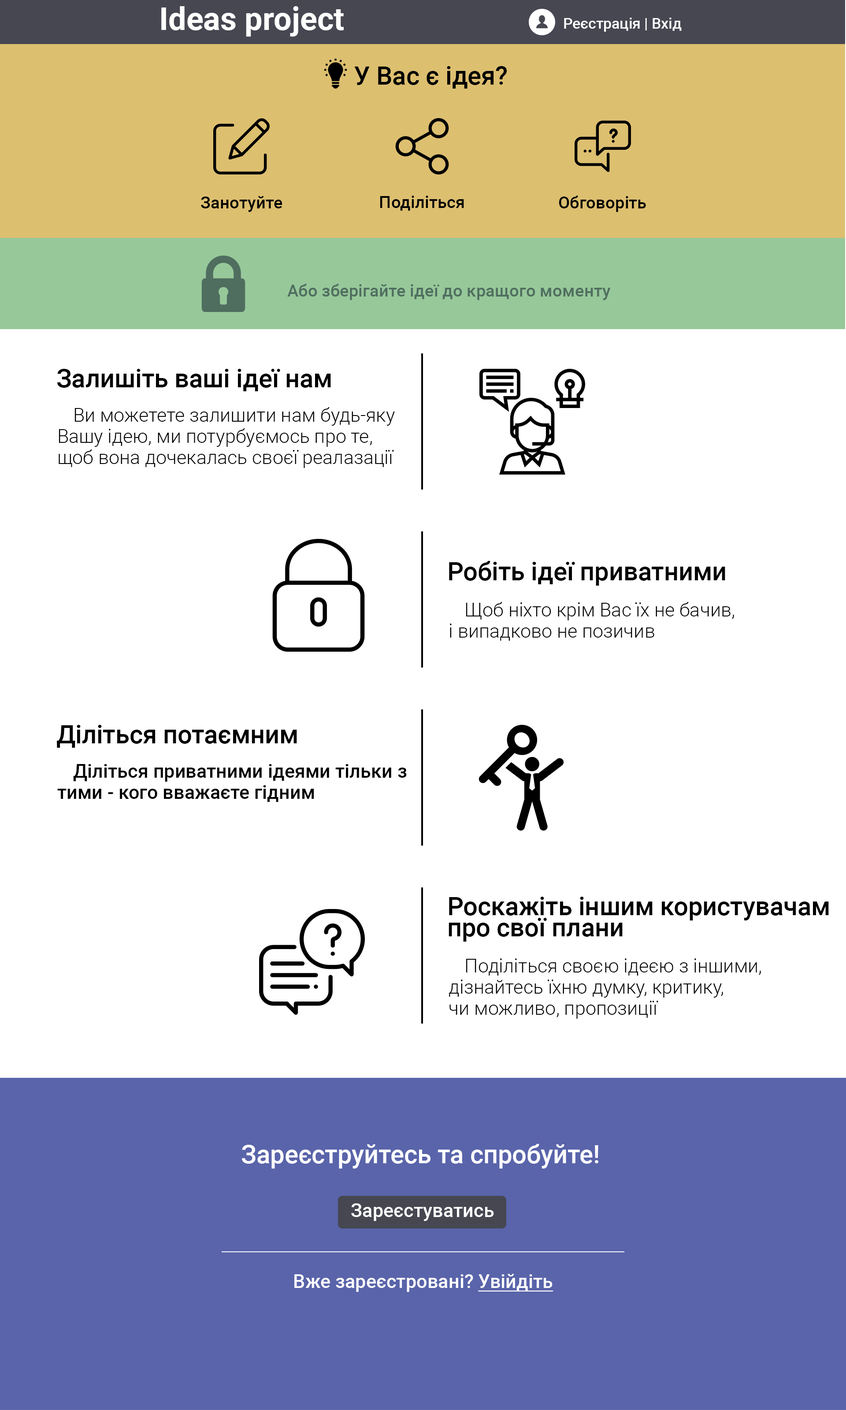
<style>
.page{position:relative;width:846px;height:1410px;background:#ffffff}
.page>*{position:absolute;margin:0}
.t1{font:31.7px "Roboto-Bold";color:#ffffff}
.t2{font:14.8px "Roboto-Medium";color:#ffffff}
.t3{font:25.4px "Roboto-Medium";color:#000000}
.t4{font:16.9px "Roboto-Medium";color:#000000}
.t5{font:16.9px "Roboto-Medium";color:#4f6e5f}
.t6{font:19px/21.1px "Roboto-Light";color:#000000}
.t7{font:19px/21.1px "Roboto-Medium";color:#000000}
.t8{font:25.4px/21.1px "Roboto-Medium";color:#000000}
.t9{font:25.4px "Roboto-Medium";color:#ffffff}
.t10{font:19px "Roboto-Medium";color:#ffffff}
.t11{font:19px "Roboto-Medium";color:#ffffff;text-decoration:underline}
</style>
<div class="page">
<p class="t1" style="left:161px;top:6px;width:183px;height:31px">Ideas project</p>
<p class="t2" style="left:564px;top:18px;width:118px;height:14px">Реєстрація | Вхід</p>
<p class="t3" style="left:354px;top:66px;width:153px;height:23px">У Вас є ідея?</p>
<p class="t4" style="left:201px;top:196px;width:81px;height:16px">Занотуйте</p>
<p class="t4" style="left:380px;top:196px;width:84px;height:15px">Поділіться</p>
<p class="t4" style="left:559px;top:196px;width:87px;height:16px">Обговоріть</p>
<p class="t5" style="left:287px;top:284px;width:324px;height:16px">Або зберігайте ідеї до кращого моменту</p>
<p class="t3" style="left:57px;top:369px;width:274px;height:22px">Залишіть ваші ідеї нам</p>
<p class="t6" style="left:59px;top:407px;width:336px;height:61px"><span class="t7"><br></span> Ви можетете залишити нам будь-яку<br>Вашу ідею, ми потурбуємось про те,<br>щоб вона дочекалась своєї реалазації</p>
<p class="t3" style="left:449px;top:561px;width:276px;height:24px">Робіть ідеї приватними</p>
<p class="t6" style="left:450px;top:602px;width:284px;height:39px;text-align:justify">Щоб ніхто крім Вас їх не бачив,<br>і випадково не позичив</p>
<p class="t3" style="left:57px;top:725px;width:240px;height:23px">Діліться потаємним</p>
<p class="t7" style="left:57px;top:764px;width:350px;height:38px">Діліться приватними ідеями тільки з<br>тими - кого вважаєте гідним</p>
<p class="t8" style="left:448px;top:897px;width:381px;height:44px">Роскажіть іншим користувачам<br>про свої плани</p>
<p class="t6" style="left:449px;top:958px;width:312px;height:61px;text-align:justify">Поділіться своєю ідеєю з іншими, <br>дізнайтесь їхню думку, критику,<br>чи можливо, пропозиції<br><br>Або ж знайдіть однодумців</p>
<p class="t9" style="left:242px;top:1144px;width:356px;height:24px">Зареєструйтесь та спробуйте!</p>
<p class="t10" style="left:351px;top:1203px;width:143px;height:18px">Зареєстуватись</p>
<p class="t10" style="left:294px;top:1274px;width:259px;height:18px">Вже зареєстровані? <span class="t11">Увійдіть</span></p>
</div>
